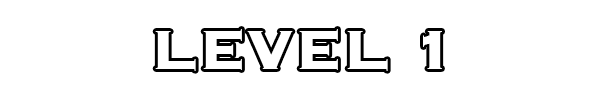
<style>
.page{position:relative;width:598px;height:100px;background:#ffffff}
.page>*{position:absolute;margin:0}
.t1{font:72px "Copperplate-Bold";color:#ffffff}
</style>
<div class="page">
<p class="t1" style="left:155px;top:29px;width:287px;height:42px">LEVEL 1</p>
</div>
